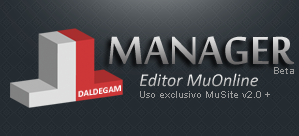
<style>
.page{position:relative;width:299px;height:136px;background:#252c31}
.page>*{position:absolute;margin:0}
.t1{font:60px "MoolBoran"}
.t2{font:18px "Calibri-Italic"}
.t3{font:11px "Calibri";color:#979797}
.t4{font:10px "ArialMT";color:#9d9d9d}
</style>
<div class="page">
<p class="t1" style="left:109px;top:36px;width:185px;height:29px">MANAGER</p>
<p class="t2" style="left:140px;top:73px;width:118px;height:14px">Editor MuOnline</p>
<p class="t3" style="left:274px;top:67px;width:20px;height:7px">Beta</p>
<p class="t4" style="left:140px;top:91px;width:130px;height:7px">Uso exclusivo MuSite v2.0 +</p>
</div>
